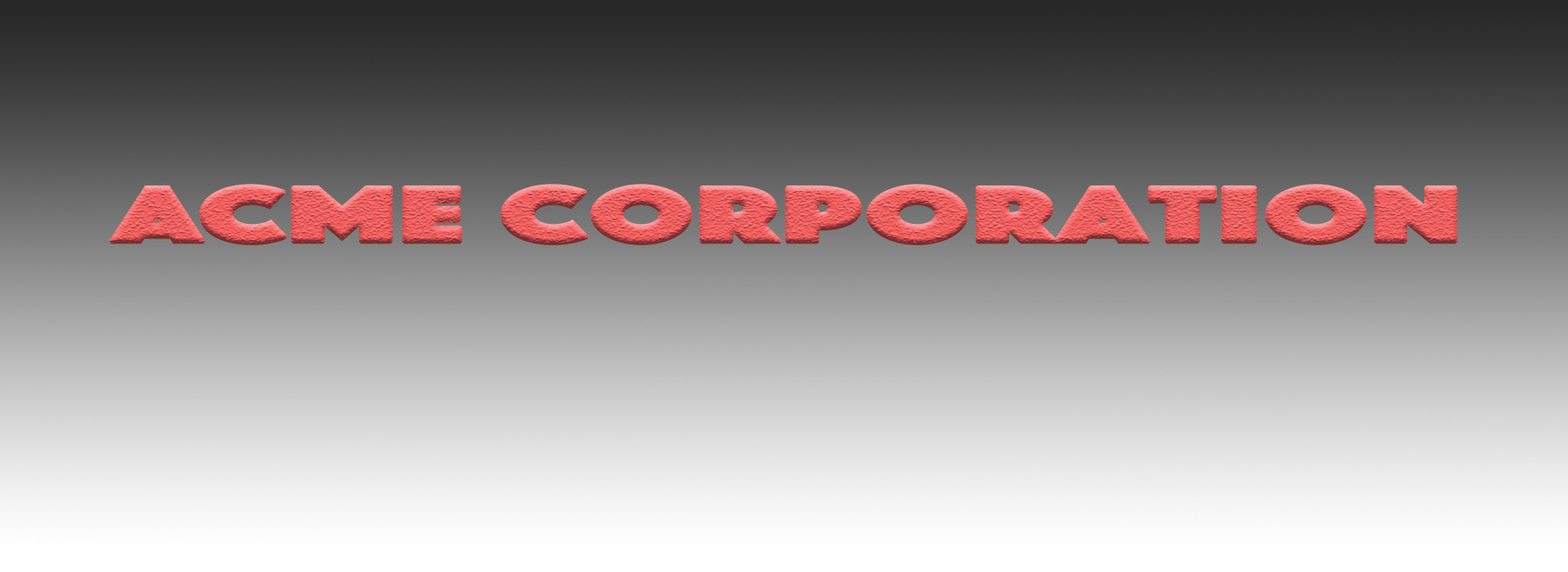
<style>
.page{position:relative;width:1568px;height:572px}
.page>*{position:absolute;margin:0}
.t1{font:81.7px "Phosphate-Inline";font-weight:bold;scale:1.71 1}
</style>
<div class="page">
<p class="t1" style="left:109px;top:184px;width:1349px;height:62px">ACME Corporation</p>
</div>
